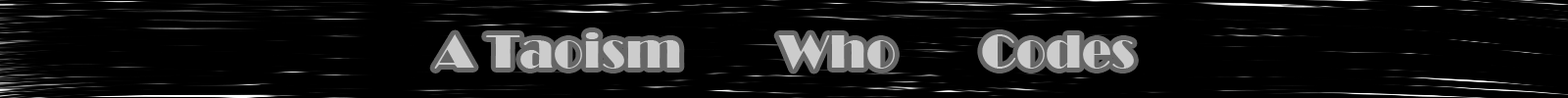
<style>
.page{position:relative;width:1568px;height:98px;background:#000000}
.page>*{position:absolute;margin:0}
.t1{font:49px "Broadway";color:#cccccc}
</style>
<div class="page">
<p class="t1" style="left:434px;top:32px;width:700px;height:38px">A Taoism        Who       Codes</p>
</div>
